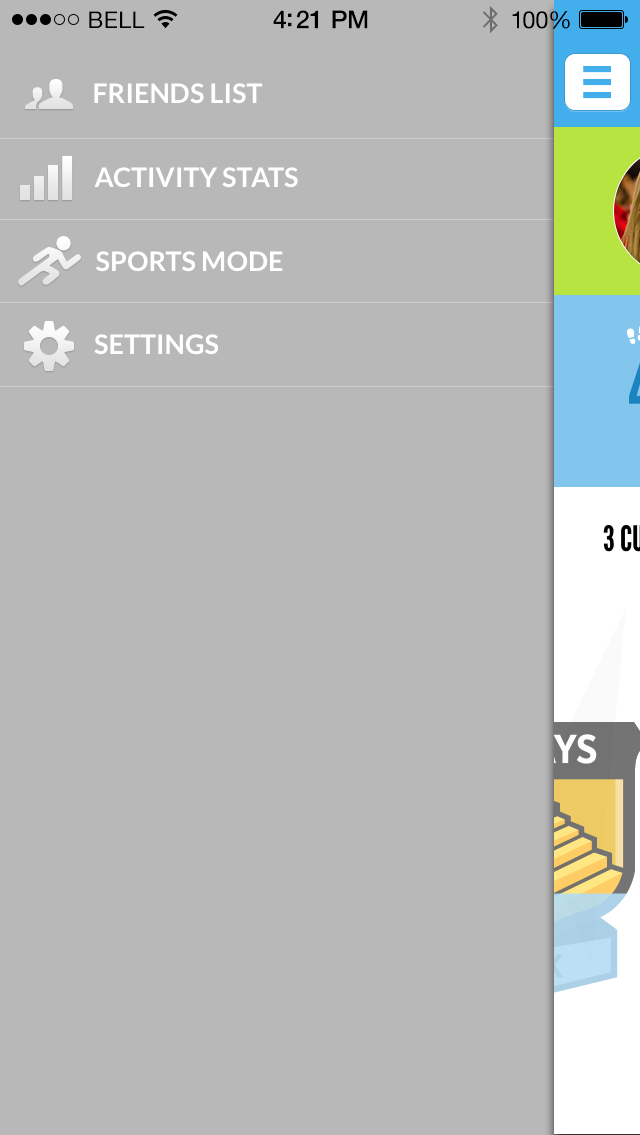
<style>
.page{position:relative;width:640px;height:1135px;background:#b8b8b8}
.page>*{position:absolute;margin:0}
.t1{font:23px "HelveticaNeue";letter-spacing:0.02em;color:#000000}
.t2{font:25px "HelveticaNeue-Medium";letter-spacing:-0.02em;color:#000000}
.t3{font:24px "HelveticaNeue";letter-spacing:-0.02em;color:#010101}
.t4{font:27px "Lato-Bold";color:#ffffff}
</style>
<div class="page">
<p class="t1" style="left:89px;top:11px;width:56px;height:17px">BELL</p>
<p class="t2" style="left:273px;top:10px;width:95px;height:19px">4:21 PM</p>
<p class="t3" style="left:512px;top:11px;width:58px;height:18px">100%</p>
<p class="t4" style="left:94px;top:83px;width:169px;height:21px">FRIENDS LIST</p>
<p class="t4" style="left:94px;top:167px;width:204px;height:21px">ACTIVITY STATS</p>
<p class="t4" style="left:96px;top:251px;width:187px;height:21px">SPORTS MODE</p>
<p class="t4" style="left:94px;top:334px;width:125px;height:21px">SETTINGS</p>
</div>
